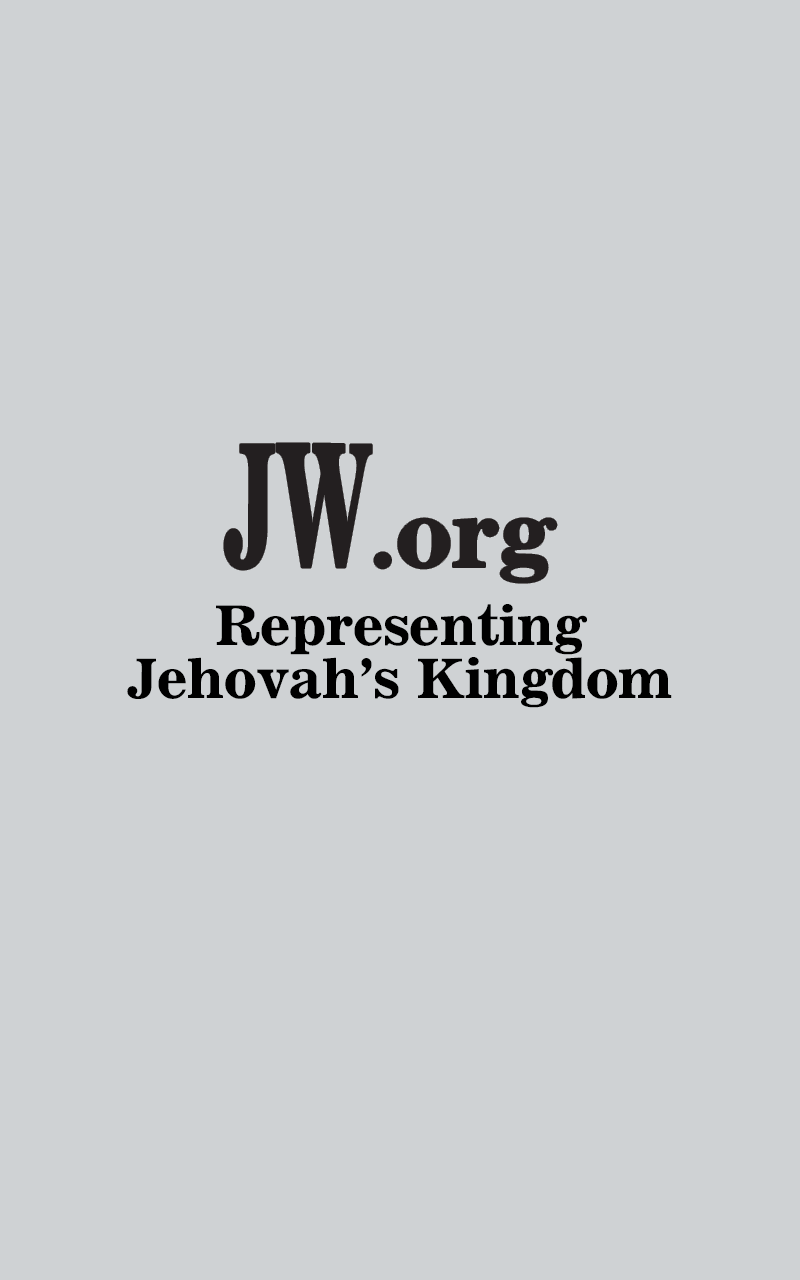
<style>
.page{position:relative;width:800px;height:1280px;background:#cfd2d4}
.page>*{position:absolute;margin:0}
.t1{font:53.4px "Ion-Bold";color:#000000}
</style>
<div class="page">
<p class="t1" style="left:216px;top:604px;width:371px;height:51px">Representing</p>
<p class="t1" style="left:127px;top:657px;width:545px;height:51px">Jehovah’s Kingdom</p>
</div>
